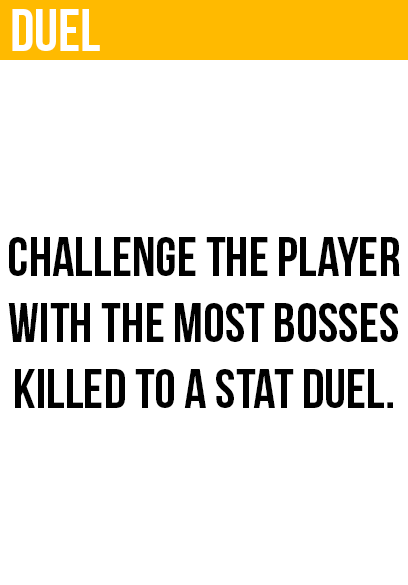
<style>
.page{position:relative;width:408px;height:585px;background:#ffffff}
.page>*{position:absolute;margin:0}
.t1{font:60px "BebasNeue";color:#ffffff}
.t2{font:55px "BebasNeue";color:#000000}
</style>
<div class="page">
<p class="t1" style="left:12px;top:9px;width:88px;height:42px">duel</p>
<p class="t2" style="left:8px;top:237px;width:392px;height:171px;text-align:center">challenge the player<br>with the most bosses<br>killed to a stat duel.</p>
</div>
